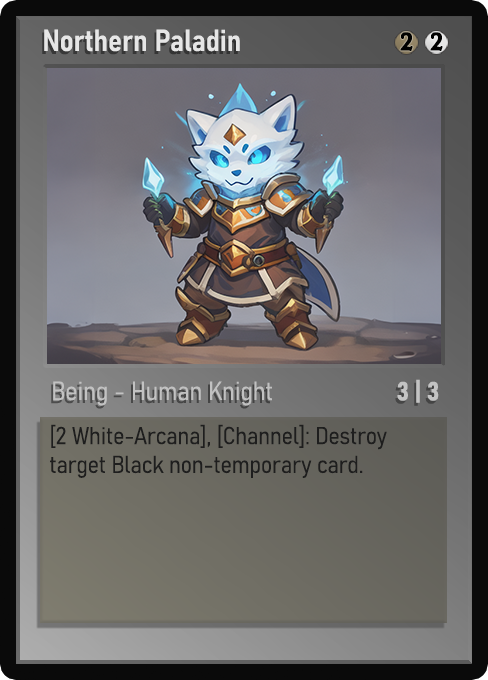
<style>
.page{position:relative;width:488px;height:680px}
.page>*{position:absolute;margin:0}
.t1{font:30px "Bahnschrift-SemiBoldSemiCondensed";color:#f2f2f2;font-weight:bold}
.t2{font:25px "WTRRoycroft";color:#000000;font-weight:bold;scale:1.09 1}
.t3{font:26px "Bahnschrift-LightSemiCondensed";color:#c8c8c8;font-weight:bold}
.t4{font:26px "Bahnschrift-BoldSemiCondensed";color:#c3c3c3;font-weight:bold}
.t5{font:24px "Bahnschrift-LightSemiCondensed";color:#1e1e1e;font-weight:bold}
</style>
<div class="page">
<p class="t1" style="left:44px;top:29px;width:196px;height:23px;opacity:0.9">Northern Paladin</p>
<p class="t2" style="left:400px;top:32px;width:13px;height:19px">2</p>
<p class="t2" style="left:430px;top:32px;width:13px;height:19px">2</p>
<p class="t3" style="left:53px;top:381px;width:219px;height:25px;opacity:0.9">Being - Human Knight</p>
<p class="t4" style="left:397px;top:379px;width:42px;height:24px">3 | 3</p>
<p class="t5" style="left:50px;top:424px;width:337px;height:54px">[2 White-Arcana], [Channel]: Destroy target Black non-temporary card.</p>
</div>
